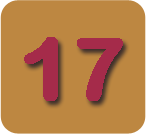
<style>
.page{position:relative;width:146px;height:134px;background:#bd8741}
.page>*{position:absolute;margin:0}
.t1{font:86.1px "ArialRoundedMTBold";letter-spacing:-0.01em;color:#a52b4a;font-weight:bold}
</style>
<div class="page">
<p class="t1" style="left:24px;top:37px;width:99px;height:64px">17</p>
</div>
